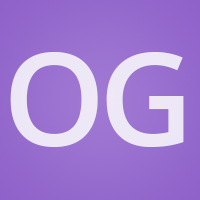
<style>
.page{position:relative;width:200px;height:200px}
.page>*{position:absolute;margin:0}
.t1{font:130px "OpenSans-Semibold";color:#ffffff}
.t2{font:130px "OpenSans-Semibold";letter-spacing:-0.05em;color:#ffffff}
</style>
<div class="page">
<p class="t1" style="left:7px;top:52px;width:180px;height:95px">OG</p>
<p class="t2" style="left:10px;top:52px;width:174px;height:95px;opacity:0.8">OG</p>
</div>
